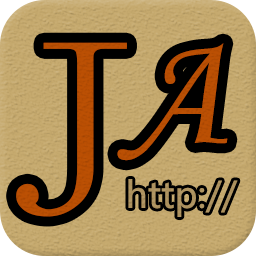
<style>
.page{position:relative;width:256px;height:256px}
.page>*{position:absolute;margin:0}
.t1{font:260px "SimSun-ExtB";color:#b94e03}
.t2{font:160px "STLiti";color:#b94e03}
</style>
<div class="page">
<p class="t1" style="left:16px;top:42px;width:111px;height:175px">J</p>
<p class="t2" style="left:117px;top:43px;width:111px;height:118px">A</p>
</div>
